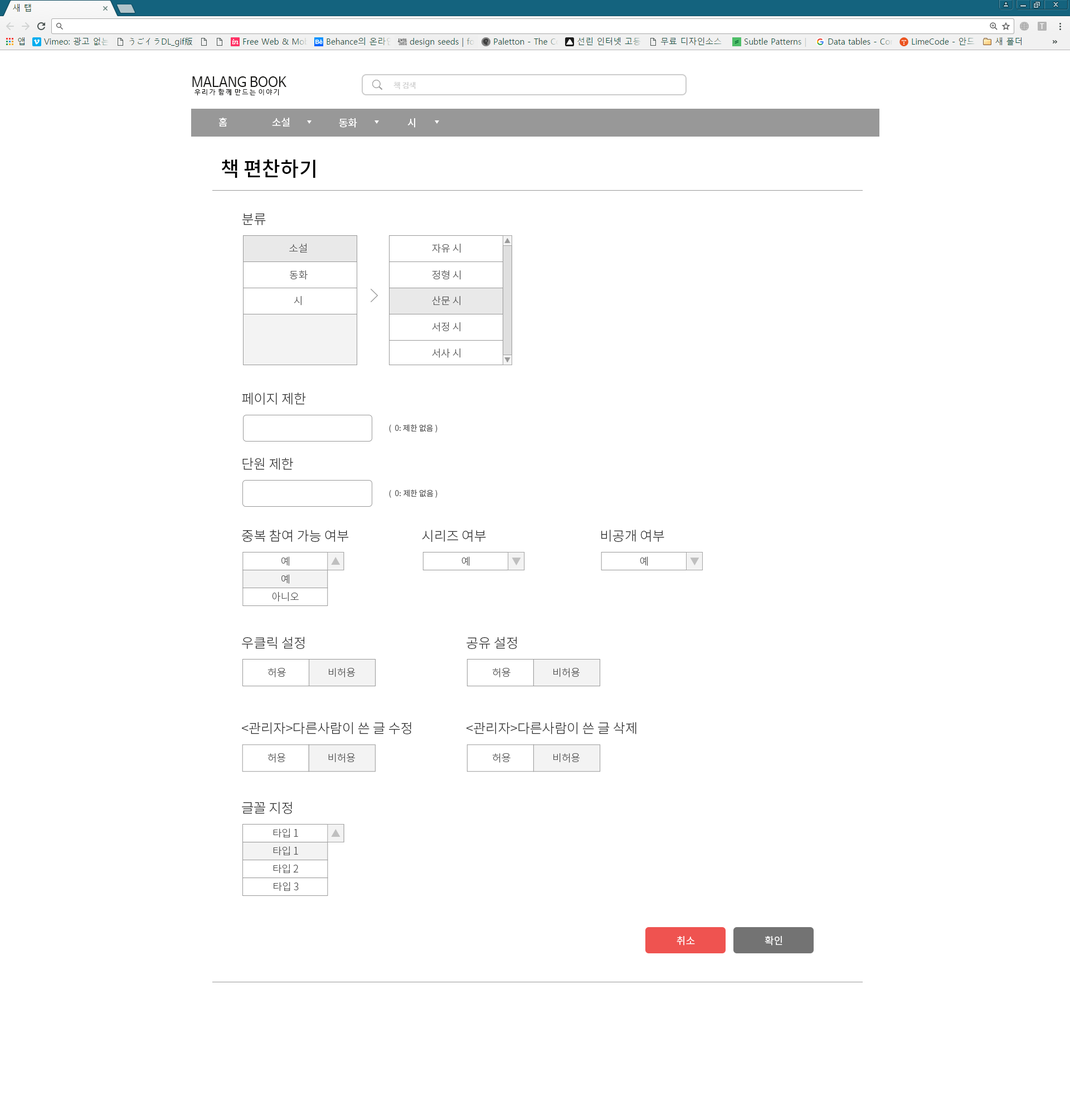
<style>
.page{position:relative;width:1070px;height:1115px;background:#ffffff}
.page>*{position:absolute;margin:0}
.t1{font:6.7px "NanumBarunGothic";color:#191918}
.t2{font:13.4px "NanumBarunGothic";color:#191918}
.t3{font:7.8px "NanumBarunGothicBold";color:#d2d2d2}
.t4{font:10px "NotoSansCJKkr-Medium";color:#ffffff}
.t5{font:7.8px "NanumBarunGothicBold";color:#f3f3f3}
.t6{font:20.1px "NotoSansCJKkr-Medium";color:#000000}
.t7{font:13.4px "NotoSansCJKkr-Light";color:#2e2e2e}
.t8{font:10px "NotoSansCJKkr-Light";color:#535353}
.t9{font:13.4px "NotoSansCJKkr-Light";color:#2d2d2d}
.t10{font:7.8px "NotoSansCJKkr-Regular";color:#585858}
.t11{font:13.3px "NotoSansCJKkr-Light";color:#2d2d2d}
.t12{font:10px "NotoSansCJKkr-Regular";color:#ffffff}
</style>
<div class="page">
<p class="t1" style="left:192px;top:76px;width:94px;height:19px"><span class="t2">MALANG BOOK<br></span>  우 리 가  함 께  만 드 는  이 야 기</p>
<p class="t3" style="left:393px;top:82px;width:23px;height:7px">책 검색</p>
<p class="t4" style="left:219px;top:118px;width:8px;height:8px">홈</p>
<p class="t4" style="left:272px;top:118px;width:18px;height:8px">소설</p>
<p class="t4" style="left:339px;top:118px;width:18px;height:10px">동화</p>
<p class="t4" style="left:407px;top:118px;width:8px;height:10px"><span class="t5"> </span>시</p>
<p class="t6" style="left:221px;top:159px;width:94px;height:19px">책 편찬하기</p>
<p class="t7" style="left:242px;top:213px;width:24px;height:12px">분류</p>
<p class="t8" style="left:289px;top:243px;width:18px;height:9px">소설</p>
<p class="t8" style="left:432px;top:244px;width:29px;height:9px">자유 시</p>
<p class="t8" style="left:432px;top:270px;width:29px;height:10px">정형 시</p>
<p class="t8" style="left:290px;top:270px;width:18px;height:10px">동화</p>
<p class="t8" style="left:294px;top:296px;width:7px;height:9px">시</p>
<p class="t8" style="left:432px;top:296px;width:28px;height:9px">산문 시</p>
<p class="t8" style="left:432px;top:322px;width:28px;height:10px">서정 시</p>
<p class="t8" style="left:432px;top:348px;width:28px;height:10px">서사 시</p>
<p class="t9" style="left:242px;top:392px;width:64px;height:13px">페이지 제한</p>
<p class="t10" style="left:389px;top:424px;width:48px;height:8px">(  0: 제한 없음 )</p>
<p class="t11" style="left:242px;top:458px;width:51px;height:12px">단원 제한</p>
<p class="t10" style="left:389px;top:489px;width:48px;height:9px">(  0: 제한 없음 )</p>
<p class="t11" style="left:242px;top:529px;width:107px;height:13px">중복 참여 가능 여부</p>
<p class="t11" style="left:422px;top:529px;width:64px;height:13px">시리즈 여부</p>
<p class="t11" style="left:601px;top:529px;width:63px;height:13px">비공개 여부</p>
<p class="t8" style="left:281px;top:556px;width:8px;height:10px">예</p>
<p class="t8" style="left:461px;top:556px;width:9px;height:10px">예</p>
<p class="t8" style="left:640px;top:556px;width:8px;height:10px">예</p>
<p class="t8" style="left:281px;top:574px;width:8px;height:9px">예</p>
<p class="t8" style="left:272px;top:591px;width:27px;height:10px">아니오</p>
<p class="t9" style="left:242px;top:636px;width:62px;height:13px">우클릭 설정</p>
<p class="t9" style="left:466px;top:636px;width:51px;height:13px">공유 설정</p>
<p class="t8" style="left:267px;top:668px;width:19px;height:9px">허용</p>
<p class="t8" style="left:329px;top:668px;width:26px;height:9px">비허용</p>
<p class="t8" style="left:492px;top:668px;width:18px;height:9px">허용</p>
<p class="t8" style="left:553px;top:668px;width:27px;height:9px">비허용</p>
<p class="t9" style="left:242px;top:722px;width:169px;height:12px">&lt;관리자&gt;다른사람이 쓴 글 수정</p>
<p class="t9" style="left:466px;top:722px;width:170px;height:12px">&lt;관리자&gt;다른사람이 쓴 글 삭제</p>
<p class="t8" style="left:267px;top:753px;width:18px;height:9px">허용</p>
<p class="t8" style="left:328px;top:753px;width:27px;height:9px">비허용</p>
<p class="t8" style="left:492px;top:753px;width:18px;height:9px">허용</p>
<p class="t8" style="left:553px;top:753px;width:27px;height:9px">비허용</p>
<p class="t9" style="left:242px;top:801px;width:50px;height:13px">글꼴 지정</p>
<p class="t8" style="left:273px;top:828px;width:25px;height:9px">타입 1</p>
<p class="t8" style="left:273px;top:846px;width:25px;height:9px">타입 1</p>
<p class="t8" style="left:273px;top:864px;width:25px;height:9px">타입 2</p>
<p class="t8" style="left:274px;top:882px;width:25px;height:8px">타입 3</p>
<p class="t12" style="left:677px;top:936px;width:18px;height:9px">취소</p>
<p class="t12" style="left:765px;top:935px;width:17px;height:10px">확인</p>
</div>
